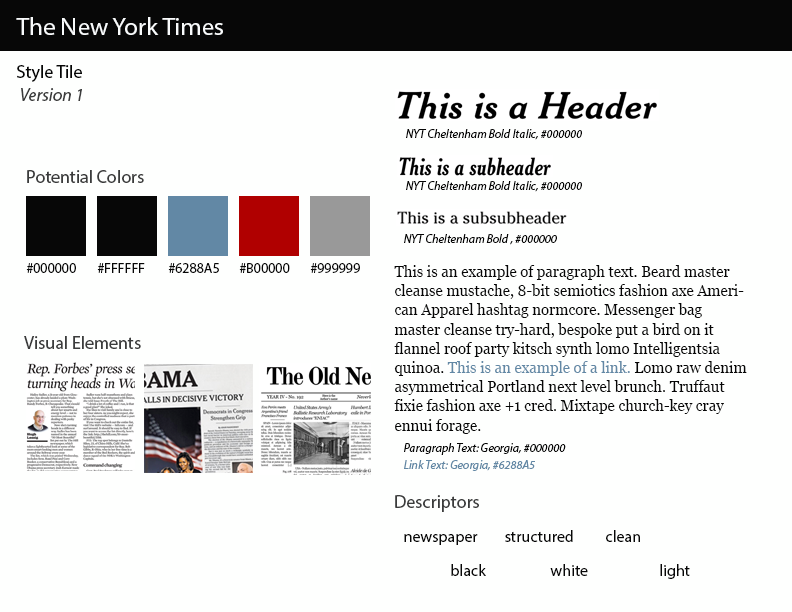
<style>
.page{position:relative;width:792px;height:612px;background:#fefffe}
.page>*{position:absolute;margin:0}
.t1{font:24.9px "MyriadPro-Regular";color:#f9fbfc}
.t2{font:18px "MyriadPro-Regular";color:#060606}
.t3{font:18px "MyriadPro-It";color:#3b3c3c}
.t4{font:12px "MyriadPro-It";color:#060606}
.t5{font:18px "MyriadPro-Regular";color:#3b3c3c}
.t6{font:14px "MyriadPro-Regular";color:#070707}
.t7{font:16px "Georgia";color:#060606;scale:0.93 1}
.t8{font:16px "Georgia";color:#6288a5;scale:0.93 1}
.t9{font:12px "MyriadPro-It";color:#6288a5}
.t10{font:16px "MyriadPro-Regular";color:#070707}
</style>
<div class="page">
<p class="t1" style="left:16px;top:17px;width:207px;height:18px">The New York Times</p>
<p class="t2" style="left:17px;top:65px;width:65px;height:17px">Style Tile</p>
<p class="t3" style="left:21px;top:88px;width:61px;height:13px">Version 1</p>
<p class="t4" style="left:406px;top:129px;width:176px;height:11px">NYT Cheltenham Bold Italic, #000000</p>
<p class="t5" style="left:27px;top:170px;width:117px;height:13px">Potential Colors</p>
<p class="t4" style="left:406px;top:181px;width:176px;height:11px">NYT Cheltenham Bold Italic, #000000</p>
<p class="t4" style="left:404px;top:234px;width:153px;height:11px">NYT Cheltenham Bold , #000000</p>
<p class="t6" style="left:26px;top:263px;width:50px;height:10px">#000000</p>
<p class="t6" style="left:97px;top:263px;width:48px;height:10px">#FFFFFF</p>
<p class="t6" style="left:168px;top:263px;width:51px;height:10px">#6288A5</p>
<p class="t6" style="left:239px;top:263px;width:51px;height:10px">#B00000</p>
<p class="t6" style="left:310px;top:263px;width:50px;height:10px">#999999</p>
<p class="t7" style="left:394px;top:265px;width:353px;height:169px">This is an example of paragraph text. Beard master cleanse mustache, 8-bit semiotics fashion axe American Apparel hashtag normcore. Messenger bag master cleanse try-hard, bespoke put a bird on it flannel roof party kitsch synth lomo Intelligentsia quinoa. <span class="t8">This is an example of a link. </span>Lomo raw denim asymmetrical Portland next level brunch. Truffaut fixie fashion axe +1 cred. Mixtape church-key cray ennui forage.</p>
<p class="t5" style="left:24px;top:336px;width:117px;height:13px">Visual Elements</p>
<p class="t4" style="left:404px;top:443px;width:162px;height:12px">Paragraph Text: Georgia, #000000</p>
<p class="t9" style="left:404px;top:460px;width:131px;height:11px">Link Text: Georgia, #6288A5</p>
<p class="t5" style="left:395px;top:495px;width:84px;height:17px">Descriptors</p>
<p class="t10" style="left:404px;top:534px;width:74px;height:11px">newspaper</p>
<p class="t10" style="left:505px;top:530px;width:68px;height:12px">structured</p>
<p class="t10" style="left:606px;top:530px;width:34px;height:12px">clean</p>
<p class="t10" style="left:451px;top:564px;width:35px;height:12px">black</p>
<p class="t10" style="left:550px;top:564px;width:38px;height:12px">white</p>
<p class="t10" style="left:660px;top:564px;width:30px;height:15px">light</p>
</div>
